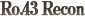
<style>
.page{position:relative;width:85px;height:19px;background:#ffffff}
.page>*{position:absolute;margin:0}
.t1{font:18px "RyuminPro-ExBold";letter-spacing:-0.08em;color:#4a3f32;font-weight:bold;scale:0.9 1}
</style>
<div class="page">
<p class="t1" style="left:0px;top:1px;width:85px;height:15px">Ro.43 Recon</p>
</div>
